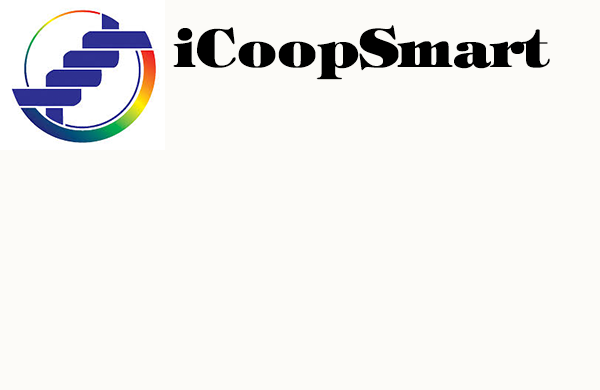
<style>
.page{position:relative;width:600px;height:390px;background:#fcfbf8}
.page>*{position:absolute;margin:0}
.t1{font:80px "DSUKrungKaSame";color:#000000}
</style>
<div class="page">
<p class="t1" style="left:173px;top:25px;width:377px;height:55px">iCoopSmart</p>
</div>
